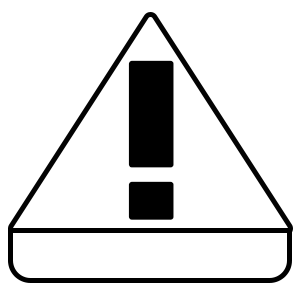
<style>
.page{position:relative;width:300px;height:300px;background:#ffffff}
.page>*{position:absolute;margin:0}
.t1{font:159.4px "moon_get-Heavy";letter-spacing:0.02em;color:#000000}
</style>
<div class="page">
<p class="t1" style="left:128px;top:60px;width:46px;height:160px">!</p>
</div>
